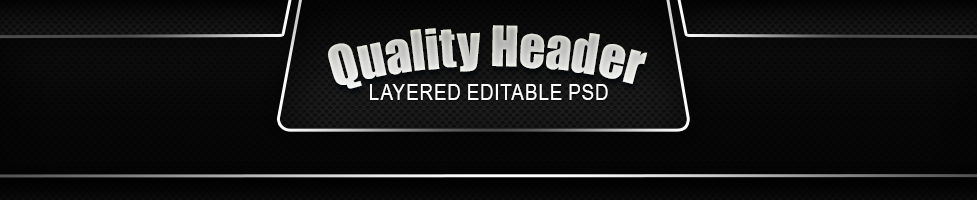
<style>
.page{position:relative;width:977px;height:200px}
.page>*{position:absolute;margin:0}
.t1{font:51.6px "Impact";color:#d7d7d3}
.t2{font:23.6px "Impact";color:#d7d7d3}
.t3{font:23.2px "ArialNarrow";letter-spacing:0.01em;color:#ffffff;text-transform:uppercase}
</style>
<div class="page">
<p class="t1" style="left:328px;top:25px;width:320px;height:64px"><span class="t2">                                          </span>Quality Header</p>
<p class="t3" style="left:370px;top:84px;width:238px;height:16px">Layered Editable PSD</p>
</div>
